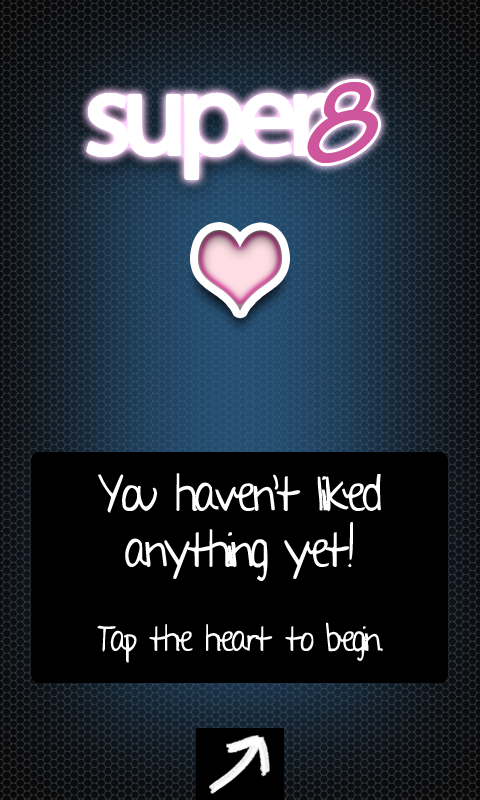
<style>
.page{position:relative;width:480px;height:800px;background:#000000}
.page>*{position:absolute;margin:0}
.t1{font:120px "TektonPro-BoldObl";letter-spacing:-0.08em;color:#ce569d}
.t2{font:120px "MyriadPro-Regular";letter-spacing:-0.08em;color:#ffffff}
.t3{font:46.7px "AYearWithoutRain";letter-spacing:-0.08em;color:#ffffff}
.t4{font:33.3px "AYearWithoutRain";letter-spacing:-0.08em;color:#ffffff}
</style>
<div class="page">
<p class="t1" style="left:307px;top:82px;width:71px;height:81px">8</p>
<p class="t2" style="left:88px;top:94px;width:237px;height:84px">super</p>
<p class="t2" style="left:88px;top:94px;width:237px;height:84px">super</p>
<p class="t3" style="left:97px;top:473px;width:286px;height:190px;text-align:center">You haven‘t liked<br>anything yet!<br><br><span class="t4">Tap the heart to begin.</span></p>
</div>
